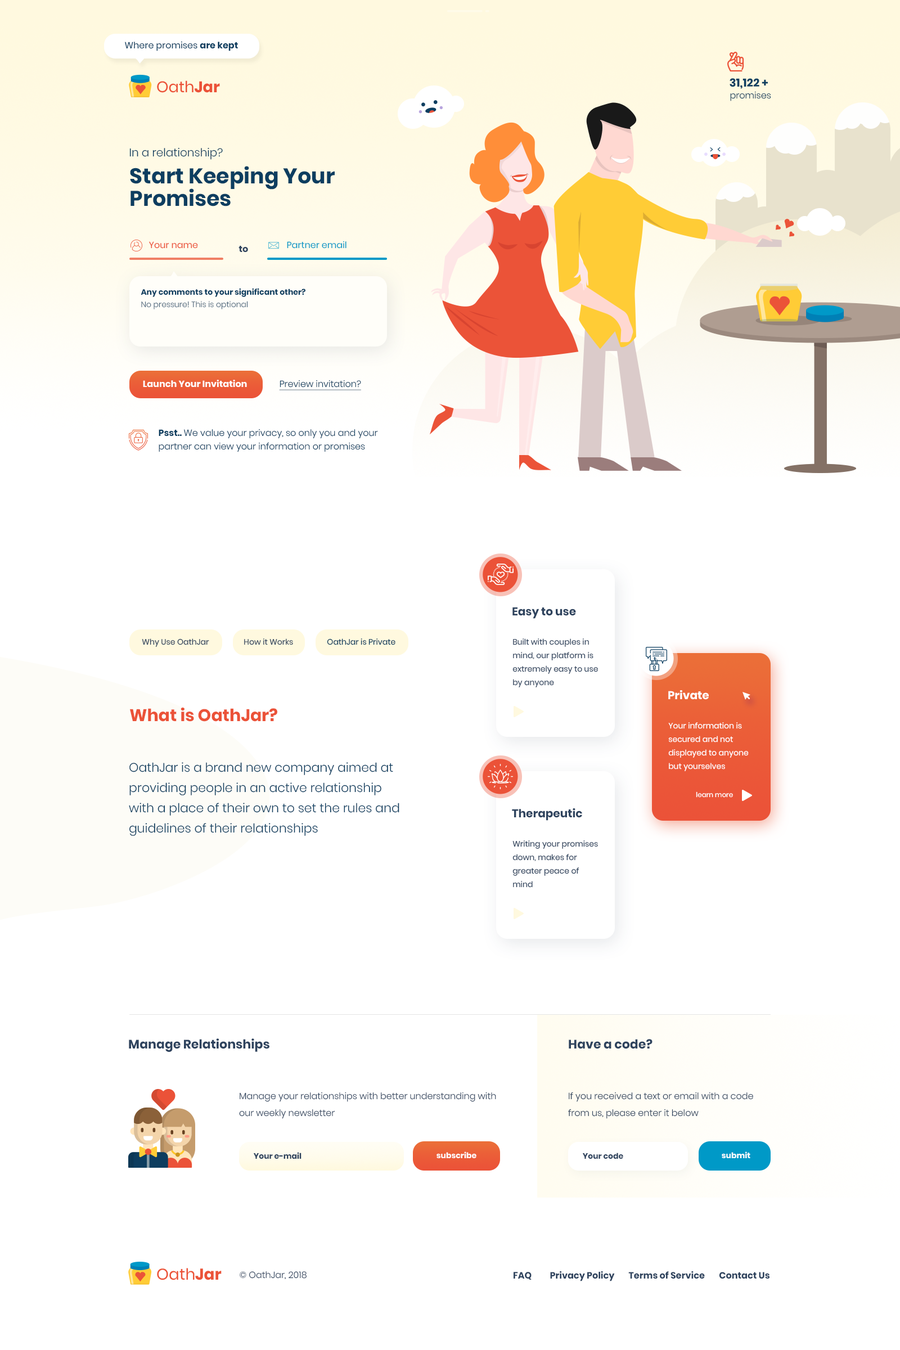
<style>
.page{position:relative;width:900px;height:1350px;background:#ffffff}
.page>*{position:absolute;margin:0}
.t1{font:9px "Poppins-Regular";color:#0d3e60}
.t2{font:9px "Poppins-Bold";color:#0d3e60}
.t3{font:11.3px "Poppins-Bold";color:#0d3e60}
.t4{font:9px "Poppins-Light";color:#0d3e60}
.t5{font:11.2px "Poppins-Light";color:#0d3e60}
.t6{font:21.3px/22.4px "Poppins-Bold";color:#0d3e60}
.t7{font:9px "Poppins-Regular";color:#eb5238}
.t8{font:9px "Poppins-Bold";color:#2e435e}
.t9{font:8.9px "Poppins-Regular";color:#0099c7}
.t10{font:7.9px "Poppins-Bold";color:#0d3e60}
.t11{font:7.9px "Poppins-Light";color:#4b657c}
.t12{font:9px "Poppins-Bold";color:#ffffff}
.t13{font:9px "Poppins-Light";color:#0d3e60;text-decoration:underline}
.t14{font:9px/13.4px "Poppins-Light";color:#0d3e60}
.t15{font:9px/13.4px "Poppins-Bold";color:#0d3e60}
.t16{font:11.2px "Poppins-Bold";color:#2e435e}
.t17{font:7.9px "Poppins-Regular";color:#2e435e}
.t18{font:7.9px "Poppins-Regular";color:#0d3e60}
.t19{font:7.9px/13.5px "Poppins-Regular";color:#2e435e}
.t20{font:11.2px "Poppins-Bold";color:#ffffff}
.t21{font:16.9px "Poppins-Bold";color:#eb5238}
.t22{font:7.9px/13.5px "Poppins-Regular";color:#ffffff}
.t23{font:12.4px/20.2px "Poppins-Light";color:#0d3e60}
.t24{font:6.8px "Poppins-Regular";color:#ffffff}
.t25{font:12.4px "Poppins-Bold";color:#2e435e}
.t26{font:9px/16.9px "Poppins-Light";color:#2e435e}
.t27{font:7.9px "Poppins-Bold";color:#2e435e}
.t28{font:7.9px "Poppins-Bold";color:#ffffff}
.t29{font:9px "Poppins-Light";color:#2e435e}
.t30{font:9.3px "Poppins-Bold";color:#2e435e}
.t31{font:9.1px "Poppins-Bold";color:#2e435e}
</style>
<div class="page">
<p class="t1" style="left:125px;top:41px;width:113px;height:10px">Where promises <span class="t2">are kept</span></p>
<p class="t3" style="left:730px;top:78px;width:38px;height:11px">31,122 +</p>
<p class="t4" style="left:730px;top:91px;width:41px;height:10px">promises</p>
<p class="t5" style="left:129px;top:147px;width:94px;height:13px">In a relationship?</p>
<p class="t6" style="left:130px;top:166px;width:205px;height:40px">Start Keeping Your<br>Promises</p>
<p class="t7" style="left:149px;top:241px;width:49px;height:8px">Your name</p>
<p class="t8" style="left:238px;top:246px;width:10px;height:6px">to</p>
<p class="t9" style="left:287px;top:241px;width:59px;height:8px">Partner email</p>
<p class="t10" style="left:141px;top:288px;width:164px;height:9px">Any comments to your significant other?</p>
<p class="t11" style="left:141px;top:301px;width:107px;height:8px">No pressure! This is optional</p>
<p class="t12" style="left:143px;top:380px;width:104px;height:7px">Launch Your Invitation</p>
<p class="t13" style="left:279px;top:380px;width:82px;height:10px">Preview invitation?</p>
<p class="t14" style="left:159px;top:429px;width:219px;height:23px"><span class="t15">Psst.. </span>We value your privacy, so only you and your<br>partner can view your information or promises</p>
<p class="t16" style="left:512px;top:607px;width:64px;height:12px">Easy to use</p>
<p class="t17" style="left:142px;top:638px;width:67px;height:9px">Why Use OathJar</p>
<p class="t17" style="left:244px;top:638px;width:49px;height:7px">How it Works</p>
<p class="t18" style="left:327px;top:638px;width:68px;height:7px">OathJar is Private</p>
<p class="t19" style="left:512px;top:638px;width:86px;height:49px">Built with couples in mind, our platform is extremely easy to use by anyone</p>
<p class="t20" style="left:668px;top:690px;width:41px;height:10px">Private</p>
<p class="t21" style="left:130px;top:707px;width:147px;height:15px">What is OathJar?</p>
<p class="t22" style="left:668px;top:722px;width:81px;height:49px">Your information is secured and not displayed to anyone but yourselves</p>
<p class="t23" style="left:129px;top:762px;width:270px;height:74px">OathJar is a brand new company aimed at providing people in an active relationship with a place of their own to set the rules and guidelines of their relationships</p>
<p class="t24" style="left:696px;top:791px;width:37px;height:7px">learn more</p>
<p class="t16" style="left:512px;top:808px;width:70px;height:13px">Therapeutic</p>
<p class="t19" style="left:512px;top:840px;width:86px;height:48px">Writing your promises down, makes for greater peace of mind</p>
<p class="t25" style="left:129px;top:1038px;width:140px;height:14px">Manage Relationships</p>
<p class="t25" style="left:569px;top:1039px;width:83px;height:10px">Have a code?</p>
<p class="t26" style="left:239px;top:1092px;width:257px;height:27px">Manage your relationships with better understanding with our weekly newsletter</p>
<p class="t26" style="left:568px;top:1092px;width:185px;height:27px">If you received a text or email with a code from us, please enter it below</p>
<p class="t27" style="left:254px;top:1152px;width:48px;height:7px">Your e-mail</p>
<p class="t28" style="left:436px;top:1151px;width:40px;height:7px">subscribe</p>
<p class="t27" style="left:583px;top:1153px;width:40px;height:6px">Your code</p>
<p class="t28" style="left:722px;top:1151px;width:28px;height:7px">submit</p>
<p class="t29" style="left:240px;top:1271px;width:67px;height:8px">© OathJar, 2018</p>
<p class="t30" style="left:514px;top:1272px;width:18px;height:8px">FAQ</p>
<p class="t31" style="left:550px;top:1271px;width:65px;height:10px">Privacy Policy</p>
<p class="t31" style="left:628px;top:1271px;width:77px;height:8px">Terms of Service</p>
<p class="t31" style="left:719px;top:1272px;width:51px;height:7px">Contact Us</p>
</div>
